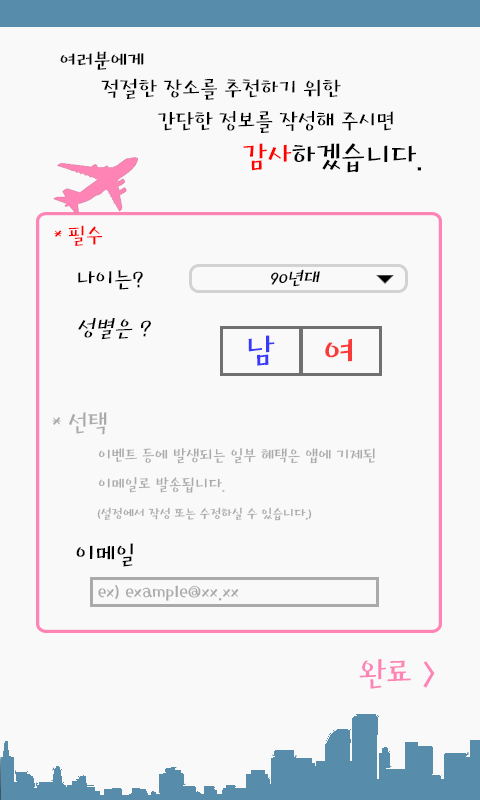
<style>
.page{position:relative;width:480px;height:800px;background:#f9f9f9}
.page>*{position:absolute;margin:0}
.t1{font:21px "HoonMakdR";color:#000000}
.t2{font:22px "HoonMakdR";color:#000000;scale:1.04 1}
.t3{font:23px "HoonMakdR";color:#000000}
.t4{font:31px "HoonMakdR";color:#000000}
.t5{font:31px "HoonMakdR";color:#ff0303}
.t6{font:22px "HoonMakdR";color:#ff0000}
.t7{font:20px "HoonMakdR";color:#000000;font-style:italic}
.t8{font:23px "HoonMakdR";color:#000000;font-style:italic}
.t9{font:35.1px "HoonMakdR";color:#3939fb}
.t10{font:42.1px "HoonMakdR";color:#fb3939}
.t11{font:26px "HoonMakdR";color:#aaaaaa;scale:0.94 1}
.t12{font:16.4px "HoonMakdR";color:#aaaaaa}
.t13{font:13px "HoonMakdR";color:#aaaaaa;scale:1.05 1}
.t14{font:25px "HoonMakdR";color:#010101}
.t15{font:20px "HoonMakdR";color:#aaaaaa}
.t16{font:34px "HoonMakdR";color:#fe84b5}
</style>
<div class="page">
<p class="t1" style="left:60px;top:51px;width:84px;height:19px">여러분에게</p>
<p class="t2" style="left:101px;top:78px;width:240px;height:22px">적절한 장소를 추천하기 위한</p>
<p class="t3" style="left:158px;top:111px;width:235px;height:22px">간단한 정보를 작성해 주시면</p>
<p class="t4" style="left:243px;top:143px;width:178px;height:30px"><span class="t5">감사</span>하겠습니다.</p>
<p class="t6" style="left:54px;top:225px;width:48px;height:21px">* 필수</p>
<p class="t3" style="left:78px;top:270px;width:65px;height:20px">나이는?</p>
<p class="t7" style="left:271px;top:269px;width:49px;height:18px">90년대</p>
<p class="t8" style="left:78px;top:318px;width:73px;height:22px">성별은 ?</p>
<p class="t9" style="left:248px;top:335px;width:27px;height:31px">남</p>
<p class="t10" style="left:325px;top:338px;width:27px;height:24px">여</p>
<p class="t11" style="left:52px;top:412px;width:55px;height:23px">* 선택</p>
<p class="t12" style="left:98px;top:448px;width:277px;height:45px">이벤트 등에 발생되는 일부 혜택은 앱에 기제된 <br>이메일로 발송됩니다.</p>
<p class="t13" style="left:97px;top:507px;width:215px;height:14px">(설정에서 작성 또는 수정하실 수 있습니다.)</p>
<p class="t14" style="left:76px;top:543px;width:57px;height:24px">이메일</p>
<p class="t15" style="left:98px;top:584px;width:141px;height:17px">ex) example@xx.xx</p>
<p class="t16" style="left:359px;top:658px;width:76px;height:31px">완료 &gt;</p>
</div>
